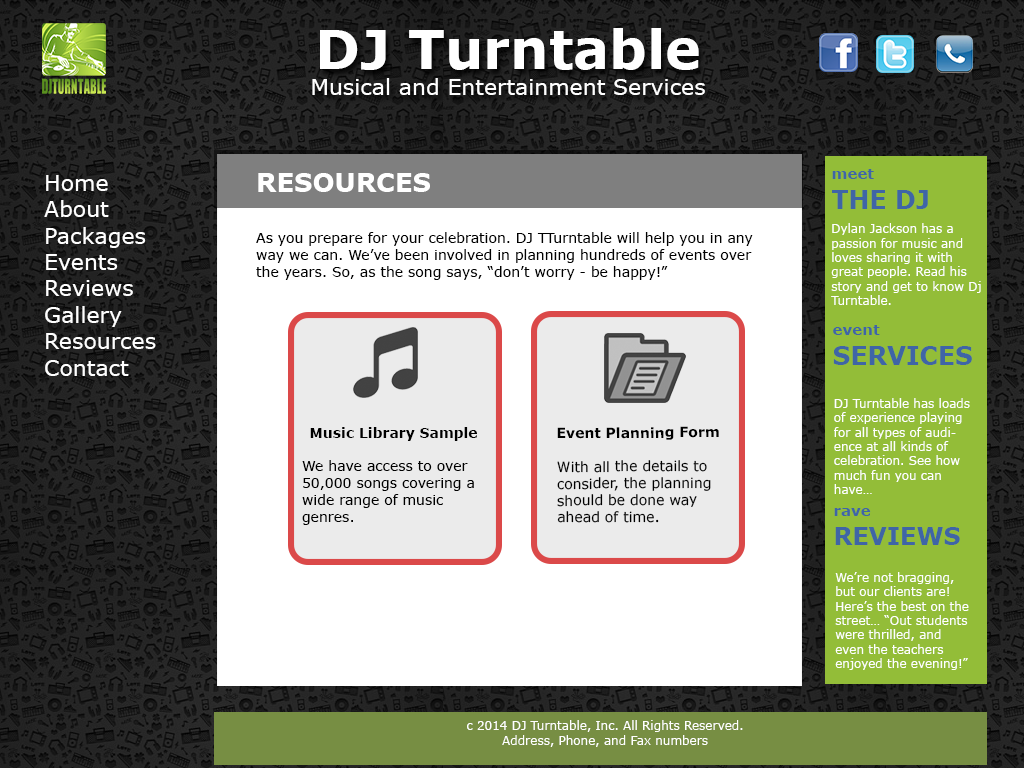
<style>
.page{position:relative;width:1024px;height:768px;background:#ffffff}
.page>*{position:absolute;margin:0}
.t1{font:22px "Verdana";color:#ffffff}
.t2{font:54px "Verdana-Bold";color:#ffffff}
.t3{font:26px "Verdana-Bold";color:#ffffff;text-transform:uppercase}
.t4{font:25px "Verdana-Bold";color:#3f65a6}
.t5{font:17px "Verdana-Bold";color:#3f65a6}
.t6{font:15px "Verdana-Bold";color:#3f65a6}
.t7{font:14px "Verdana";color:#000000}
.t8{font:12px "Verdana";color:#ffffff}
.t9{font:12px "Verdana-Bold";color:#ffffff}
.t10{font:14px "Verdana-Bold";color:#000000}
.t11{font:24px "Verdana-Bold";color:#3f65a6}
</style>
<div class="page">
<p class="t1" style="left:312px;top:28px;width:393px;height:67px;text-align:center"><span class="t2">DJ Turntable<br></span>Musical and Entertainment Services</p>
<p class="t3" style="left:258px;top:173px;width:172px;height:19px">Resources</p>
<p class="t4" style="left:832px;top:169px;width:96px;height:40px"><span class="t5"><br></span><span class="t6">meet<br></span>THE DJ</p>
<p class="t1" style="left:44px;top:175px;width:112px;height:201px">Home<br>About<br>Packages<br>Events<br>Reviews<br>Gallery<br>Resources<br>Contact</p>
<p class="t7" style="left:256px;top:232px;width:497px;height:48px">As you prepare for your celebration. DJ TTurntable will help you in any way we can. We’ve been involved in planning hundreds of events over the years. So, as the song says, “don’t worry - be happy!”</p>
<p class="t8" style="left:831px;top:223px;width:150px;height:82px;text-align:center"><span class="t9"><br></span>Dylan Jackson has a passion for music and loves sharing it with great people. Read his story and get to know Dj Turntable.</p>
<p class="t4" style="left:833px;top:325px;width:139px;height:40px"><span class="t5"><br></span><span class="t6">event<br></span>SERVICES</p>
<p class="t8" style="left:834px;top:398px;width:136px;height:96px">DJ Turntable has loads of experience playing for all types of audience at all kinds of celebration. See how much fun you can have…</p>
<p class="t7" style="left:302px;top:427px;width:175px;height:98px;text-align:center"><span class="t10">Music Library Sample<br><br></span>We have access to over 50,000 songs covering a wide range of music genres.</p>
<p class="t7" style="left:557px;top:426px;width:162px;height:97px"><span class="t10">Event Planning Form<br><br></span>With all the details to consider, the planning should be done way ahead of time.</p>
<p class="t11" style="left:834px;top:508px;width:126px;height:37px"><span class="t5"><br></span><span class="t6">rave<br></span>REVIEWS</p>
<p class="t8" style="left:835px;top:572px;width:134px;height:98px">We’re not bragging, but our clients are! Here’s the best on the street… “Out students were thrilled, and even the teachers enjoyed the evening!”</p>
<p class="t8" style="left:467px;top:720px;width:276px;height:27px;text-align:center">c 2014 DJ Turntable, Inc. All Rights Reserved.<br>Address, Phone, and Fax numbers<br>DJ_Turntable email address</p>
</div>
